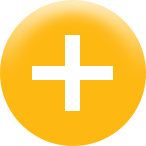
<style>
.page{position:relative;width:146px;height:146px;background:#fdb812}
.page>*{position:absolute;margin:0}
.t1{font:157.3px "ArialMT";color:#ffffff;text-transform:uppercase;font-weight:bold;scale:1.07 1}
</style>
<div class="page">
<p class="t1" style="left:32px;top:35px;width:81px;height:76px">+</p>
</div>
